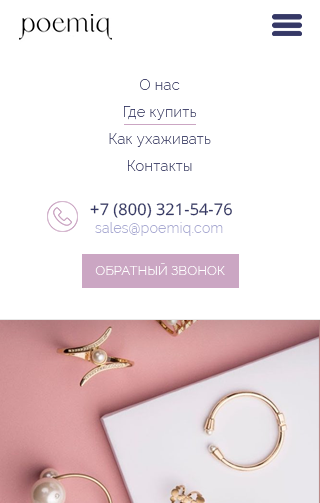
<style>
.page{position:relative;width:320px;height:503px;background:#ffffff}
.page>*{position:absolute;margin:0}
.t1{font:15px/27px "Raleway-Light";letter-spacing:0.01em;color:#353866}
.t2{font:16px "OpenSans";letter-spacing:0.01em;color:#353866}
.t3{font:14px "Raleway-Light";letter-spacing:0.01em;color:#aaabd3}
.t4{font:13px "Raleway-Light";letter-spacing:0.01em;color:#ffffff;text-transform:uppercase}
</style>
<div class="page">
<p class="t1" style="left:109px;top:79px;width:102px;height:92px;text-align:center">О нас<br>Где купить<br>Как ухаживать<br>Контакты</p>
<p class="t2" style="left:90px;top:203px;width:142px;height:15px">+7 (800) 321-54-76</p>
<p class="t3" style="left:95px;top:222px;width:128px;height:14px">sales@poemiq.com</p>
<p class="t4" style="left:95px;top:263px;width:130px;height:12px">Обратный звонок</p>
</div>
